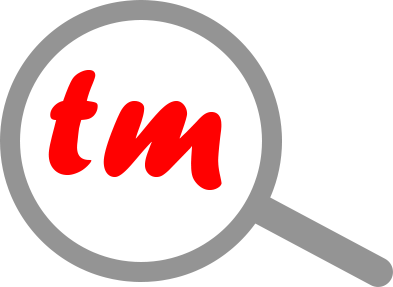
<style>
.page{position:relative;width:393px;height:287px;background:#ffffff}
.page>*{position:absolute;margin:0}
.t1{font:162.5px "ForteMT";color:#ff0101}
</style>
<div class="page">
<p class="t1" style="left:48px;top:70px;width:174px;height:120px">tm</p>
</div>
